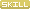
<style>
.page{position:relative;width:30px;height:9px;background:#dbcc68}
.page>*{position:absolute;margin:0}
.t1{font:8px "5x5-Pixel";color:#fffbf2}
</style>
<div class="page">
<p class="t1" style="left:2px;top:2px;width:26px;height:5px">skill</p>
</div>
